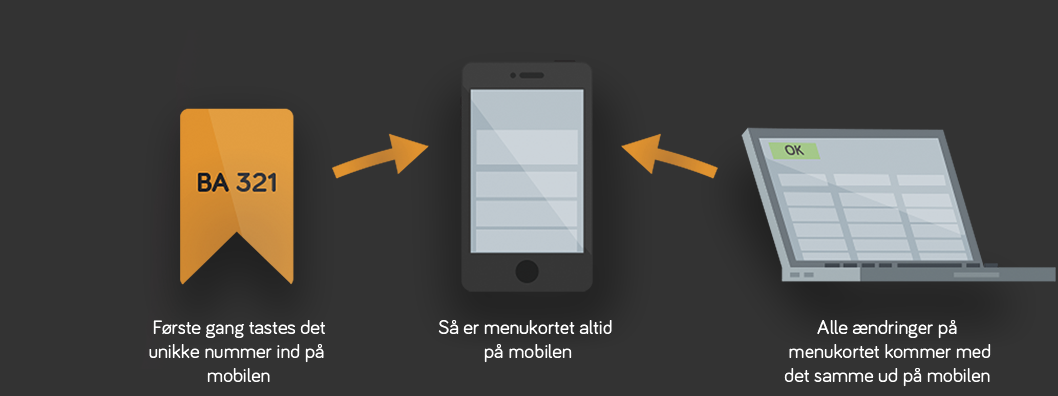
<style>
.page{position:relative;width:1058px;height:396px;background:#333333}
.page>*{position:absolute;margin:0}
.t1{font:20px "Bariol-Regular";color:#ffffff}
</style>
<div class="page">
<p class="t1" style="left:149px;top:320px;width:176px;height:62px;text-align:center">Første gang tastes det<br>unikke nummer ind på <br>mobilen</p>
<p class="t1" style="left:438px;top:320px;width:174px;height:43px;text-align:center">Så er menukortet altid <br>på mobilen</p>
<p class="t1" style="left:784px;top:320px;width:207px;height:67px;text-align:center">Alle ændringer på <br>menukortet kommer med<br>det samme ud på mobilen</p>
</div>
